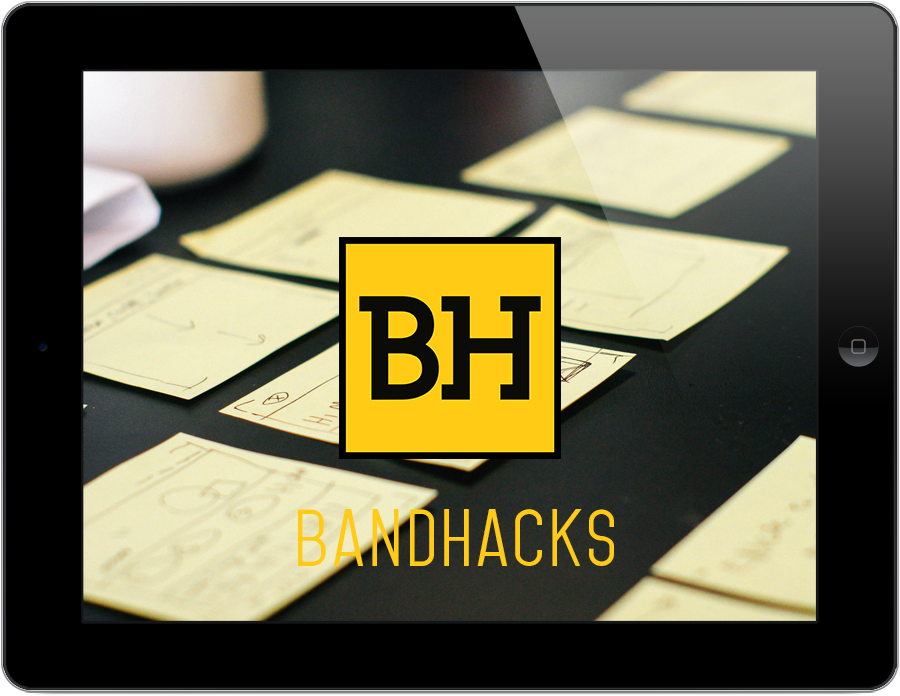
<style>
.page{position:relative;width:900px;height:696px;background:#000000}
.page>*{position:absolute;margin:0}
.t1{font:69.2px "Mohave";letter-spacing:0.06em;color:#ffcb15}
</style>
<div class="page">
<p class="t1" style="left:298px;top:509px;width:316px;height:57px">bandhacks</p>
</div>
